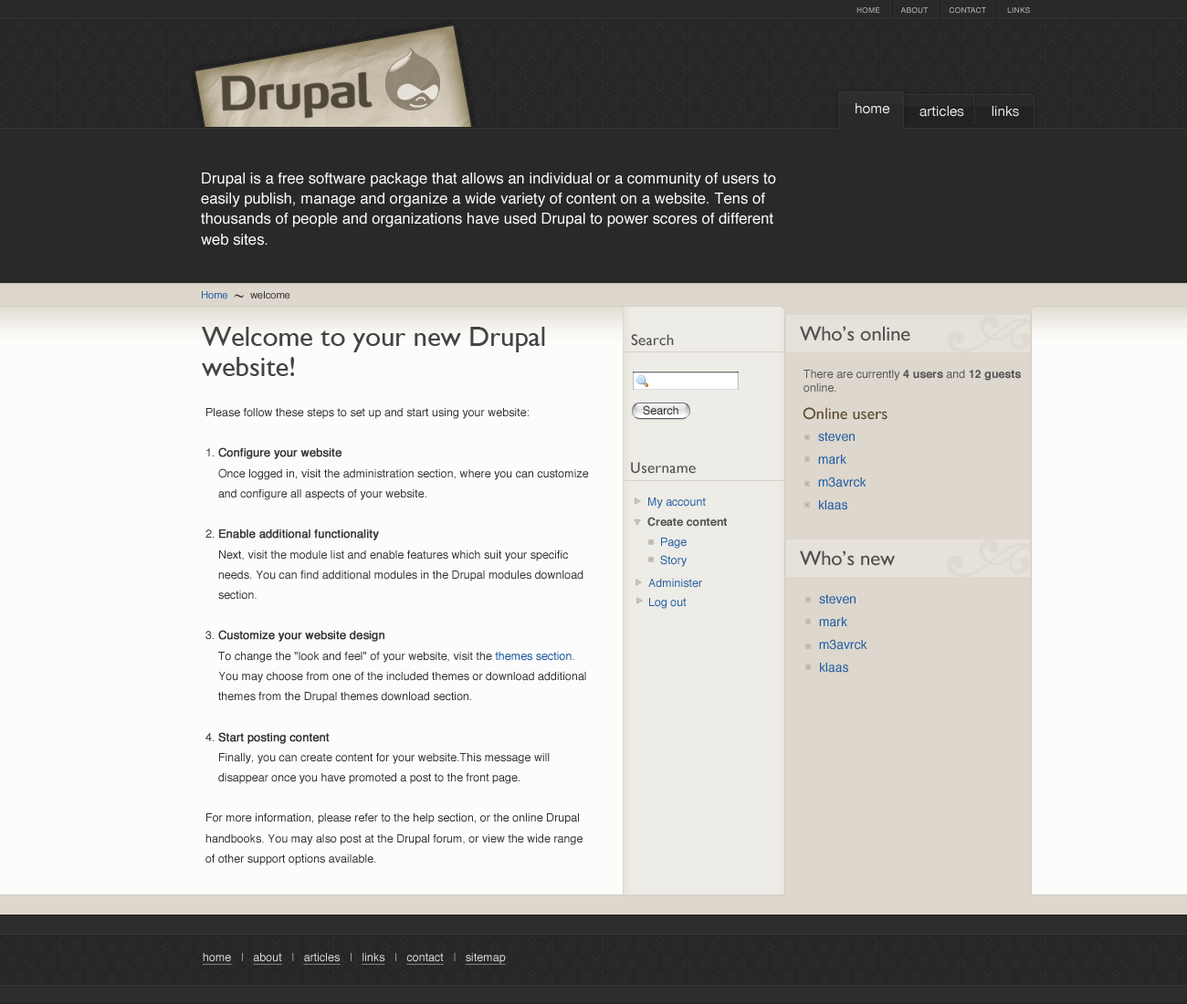
<style>
.page{position:relative;width:1187px;height:1004px;background:#fcfcfa}
.page>*{position:absolute;margin:0}
.t1{font:10.7px "HelveticaNeue";letter-spacing:0.05em;font-variant:small-caps}
.t2{font:14px "HelveticaNeue";color:#e3e5e6}
.t3{font:15.2px/20.3px "Helvetica";color:#fcfcfa}
.t4{font:10.1px "Helvetica";color:#1f5ca1}
.t5{font:10.1px "Helvetica";color:#313131}
.t6{font:27.9px/30.4px "GillSans";color:#444444}
.t7{font:20.3px "GillSans";color:#505050}
.t8{font:15.2px "GillSans";letter-spacing:0.025em;color:#505050}
.t9{font:11.4px "Helvetica";color:#555555}
.t10{font:11.4px "Helvetica-Bold";color:#555555}
.t11{font:11.4px/20.3px "Helvetica";color:#313131}
.t12{font:11.4px/20.3px "Helvetica";color:#313131;font-weight:bold}
.t13{font:11.4px/20.3px "Helvetica";color:#0f519b}
.t14{font:11.4px "Helvetica";color:#292928}
.t15{font:16.5px "GillSans";color:#5c4c30}
.t16{font:12.7px/22.8px "Helvetica";color:#1f5ca1}
.t17{font:11.4px "Helvetica";color:#1f5ca1}
.t18{font:11.4px "Helvetica";color:#dddddd;text-decoration:underline}
.t19{font:11.4px "Helvetica";color:#a49c89}
</style>
<div class="page">
<p class="t1" style="left:857px;top:7px;width:173px;height:7px">home      about      contact      links</p>
<p class="t2" style="left:856px;top:103px;width:34px;height:11px">home</p>
<p class="t2" style="left:920px;top:106px;width:99px;height:11px">articles       links</p>
<p class="t3" style="left:201px;top:173px;width:575px;height:73px">Drupal is a free software package that allows an individual or a community of users to <br>easily publish, manage and organize a wide variety of content on a website. Tens of <br>thousands of people and organizations have used Drupal to power scores of different <br>web sites.</p>
<p class="t4" style="left:202px;top:291px;width:25px;height:9px">Home</p>
<p class="t5" style="left:250px;top:291px;width:40px;height:9px">welcome</p>
<p class="t6" style="left:202px;top:327px;width:343px;height:49px">Welcome to your new Drupal <br>website!</p>
<p class="t7" style="left:800px;top:326px;width:110px;height:16px">Who’s online</p>
<p class="t8" style="left:631px;top:334px;width:43px;height:12px">Search</p>
<p class="t9" style="left:804px;top:370px;width:217px;height:23px">There are currently <span class="t10">4 users</span> and <span class="t10">12 guests</span> <br>online.</p>
<p class="t11" style="left:205px;top:408px;width:384px;height:458px">Please follow these steps to set up and start using your website:<br><br>1. <span class="t12">Configure your website</span> <br>    Once logged in, visit the administration section, where you can customize <br>    and configure all aspects of your website.<br><br>2. <span class="t12">Enable additional functionality <br></span>    Next, visit the module list and enable features which suit your specific <br>    needs. You can find additional modules in the Drupal modules download <br>    section.<br><br>3. <span class="t12">Customize your website design</span> <br>    To change the "look and feel" of your website, visit the <span class="t13">themes section</span>. <br>    You may choose from one of the included themes or download additional <br>    themes from the Drupal themes download section.<br><br>4. <span class="t12">Start posting content <br></span>    Finally, you can create content for your website.This message will <br>    disappear once you have promoted a post to the front page.<br><br>For more information, please refer to the help section, or the online Drupal <br>handbooks. You may also post at the Drupal forum, or view the wide range <br>of other support options available.</p>
<p class="t14" style="left:643px;top:405px;width:35px;height:10px">Search</p>
<p class="t15" style="left:803px;top:407px;width:85px;height:13px">Online users</p>
<p class="t16" style="left:818px;top:432px;width:49px;height:78px">steven<br>mark<br>m3avrck<br>klaas</p>
<p class="t8" style="left:631px;top:462px;width:65px;height:12px">Username</p>
<p class="t17" style="left:648px;top:498px;width:58px;height:11px">My account</p>
<p class="t10" style="left:647px;top:517px;width:80px;height:10px">Create content</p>
<p class="t17" style="left:661px;top:538px;width:26px;height:11px">Page</p>
<p class="t17" style="left:660px;top:555px;width:27px;height:12px">Story</p>
<p class="t7" style="left:800px;top:551px;width:95px;height:15px">Who’s new</p>
<p class="t17" style="left:648px;top:579px;width:54px;height:9px">Administer</p>
<p class="t17" style="left:649px;top:598px;width:38px;height:11px">Log out</p>
<p class="t16" style="left:819px;top:594px;width:49px;height:79px">steven<br>mark<br>m3avrck<br>klaas</p>
<p class="t18" style="left:203px;top:953px;width:303px;height:12px">home   <span class="t19">|   </span>about   <span class="t19">|   </span>articles   <span class="t19">|   </span>links   <span class="t19">|   </span>contact   <span class="t19">|   </span>sitemap</p>
</div>
